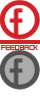
<style>
.page{position:relative;width:40px;height:100px;background:#ffffff}
.page>*{position:absolute;margin:0}
.t1{font:7px "AdventureSubtitlesNormal";color:#d2232a;text-transform:uppercase}
</style>
<div class="page">
<p class="t1" style="left:1px;top:45px;width:37px;height:6px">Feedback</p>
</div>
